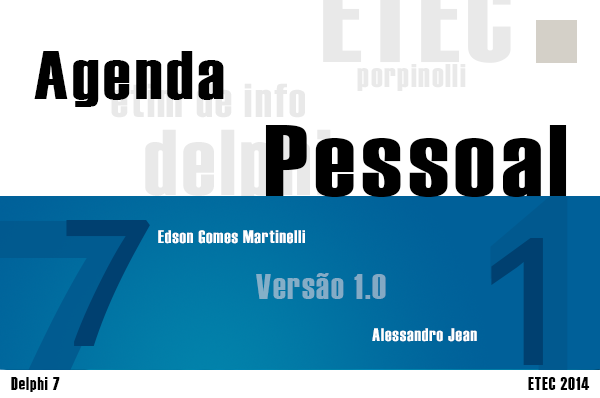
<style>
.page{position:relative;width:600px;height:398px;background:#ffffff}
.page>*{position:absolute;margin:0}
.t1{font:67.8px "Haettenschweiler";letter-spacing:0.05em;color:#000000;scale:1.14 1}
.t2{font:33px "Haettenschweiler";letter-spacing:0.05em;color:#e9e9e9}
.t3{font:101.6px "Haettenschweiler";letter-spacing:0.05em;color:#000000;scale:1.14 1}
.t4{font:200px "EstrangeloEdessa";letter-spacing:0.05em;color:#004070}
.t5{font:18px "Haettenschweiler";letter-spacing:0.05em;color:#ffffff}
.t6{font:36px "Haettenschweiler";letter-spacing:0.05em;color:#84acc7}
.t7{font:18px "Haettenschweiler";letter-spacing:0.05em;color:#010101}
</style>
<div class="page">
<p class="t1" style="left:34px;top:51px;width:190px;height:56px">Agenda</p>
<p class="t2" style="left:357px;top:64px;width:109px;height:27px">porpinolli</p>
<p class="t3" style="left:265px;top:125px;width:302px;height:72px">Pessoal</p>
<p class="t4" style="left:66px;top:220px;width:84px;height:126px">7</p>
<p class="t5" style="left:158px;top:230px;width:147px;height:14px">Edson Gomes Martinelli</p>
<p class="t4" style="left:491px;top:238px;width:52px;height:127px">1</p>
<p class="t6" style="left:256px;top:273px;width:130px;height:26px">Versão 1.0</p>
<p class="t5" style="left:372px;top:328px;width:105px;height:14px">Alessandro Jean</p>
<p class="t7" style="left:11px;top:377px;width:49px;height:15px">Delphi 7</p>
<p class="t7" style="left:528px;top:377px;width:62px;height:13px">ETEC 2014</p>
</div>
